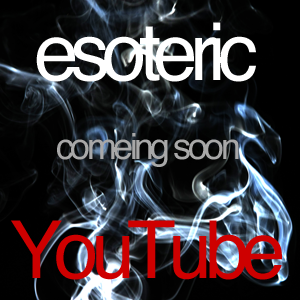
<style>
.page{position:relative;width:300px;height:300px}
.page>*{position:absolute;margin:0}
.t1{font:80px "Helvetica";letter-spacing:-0.1em;color:#ffffff}
.t2{font:36px "Helvetica";letter-spacing:-0.1em;color:#a8a8a8}
.t3{font:80px "Helvetica";letter-spacing:-0.1em;color:#ce0000}
</style>
<div class="page">
<p class="t1" style="left:36px;top:22px;width:220px;height:60px">esoteric</p>
<p class="t2" style="left:57px;top:133px;width:182px;height:34px">comeing soon</p>
<p class="t3" style="left:11px;top:220px;width:271px;height:60px">YouTube</p>
</div>
